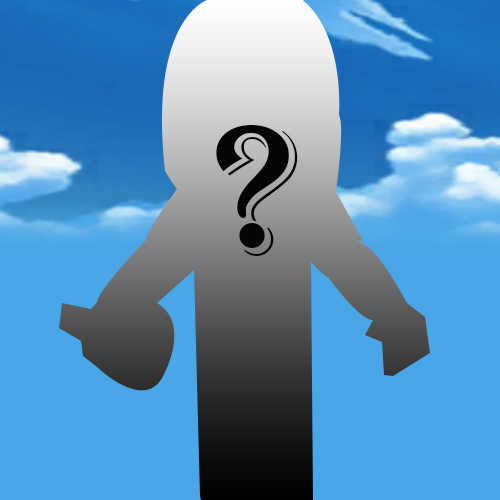
<style>
.page{position:relative;width:500px;height:500px;background:#4aa7e7}
.page>*{position:absolute;margin:0}
.t1{font:200px "Algerian";color:#050505}
</style>
<div class="page">
<p class="t1" style="left:216px;top:125px;width:82px;height:131px">?</p>
</div>
